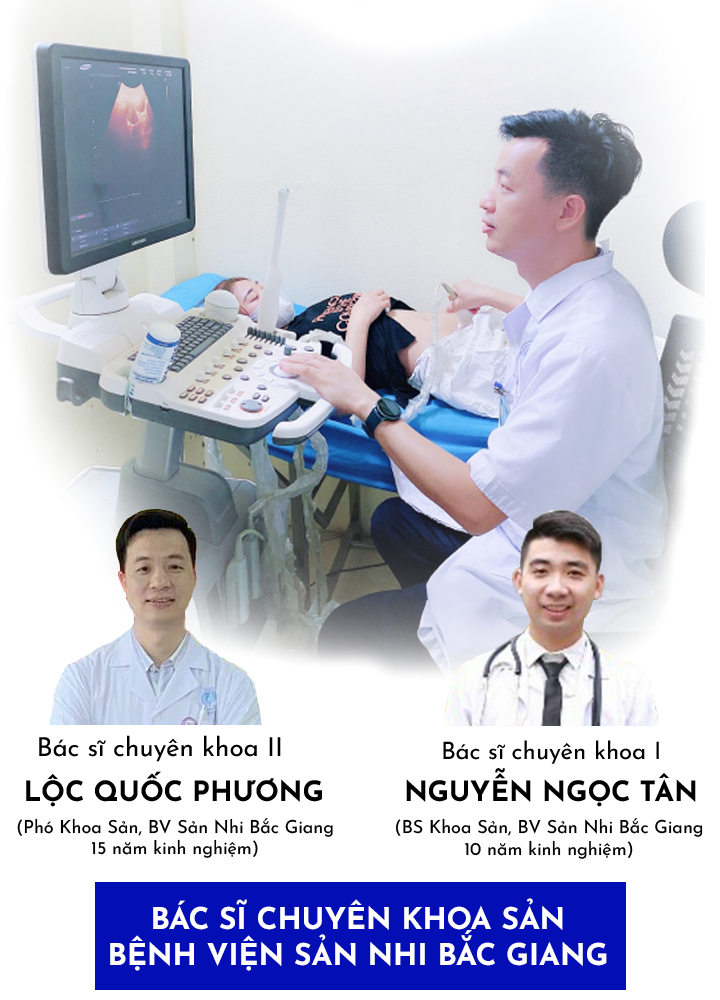
<style>
.page{position:relative;width:720px;height:1000px;background:#ffffff}
.page>*{position:absolute;margin:0}
.t1{font:26px "JosefinSans-Regular";color:#000000}
.t2{font:24px "JosefinSans-Regular";color:#000000}
.t3{font:28px "JosefinSans-Bold";color:#000000}
.t4{font:18px "JosefinSans-Regular";color:#000000}
.t5{font:30px "JosefinSans-Bold";color:#ffffff}
</style>
<div class="page">
<p class="t1" style="left:39px;top:735px;width:242px;height:27px">Bác sĩ chuyên khoa II</p>
<p class="t2" style="left:443px;top:740px;width:216px;height:24px">Bác sĩ chuyên khoa I</p>
<p class="t3" style="left:26px;top:771px;width:296px;height:36px">LỘC QUỐC PHƯƠNG</p>
<p class="t3" style="left:406px;top:768px;width:290px;height:39px">NGUYỄN NGỌC TÂN</p>
<p class="t4" style="left:17px;top:818px;width:316px;height:40px;text-align:center">(Phó Khoa Sản, BV Sản Nhi Bắc Giang<br>15 năm kinh nghiệm)</p>
<p class="t4" style="left:395px;top:818px;width:308px;height:41px;text-align:center">(BS Khoa Sản, BV Sản Nhi Bắc Giang<br>10 năm kinh nghiệm)</p>
<p class="t5" style="left:110px;top:898px;width:497px;height:73px;text-align:center">BÁC SĨ CHUYÊN KHOA SẢN<br>BỆNH VIỆN SẢN NHI BẮC GIANG</p>
</div>
